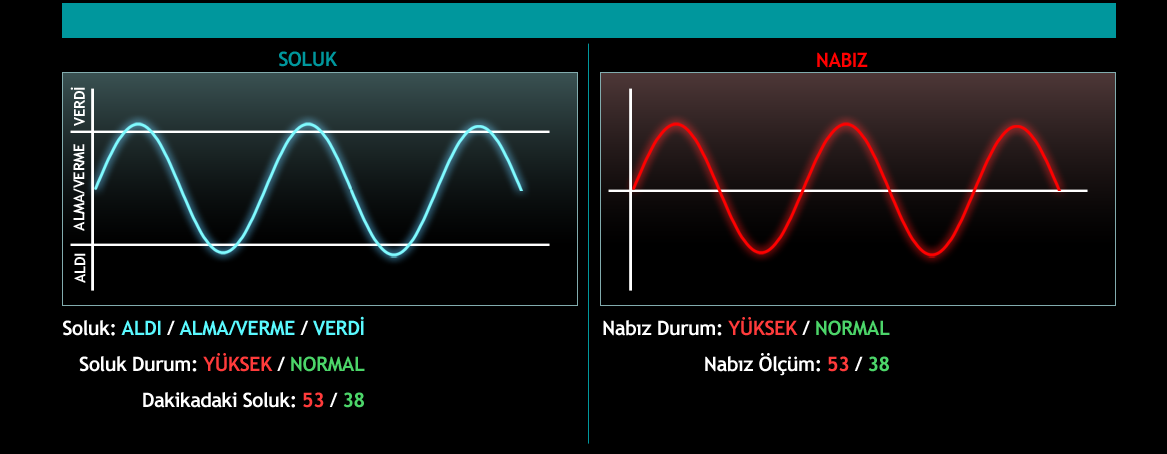
<style>
.page{position:relative;width:1167px;height:454px;background:#000000}
.page>*{position:absolute;margin:0}
.t1{font:20px "TrebuchetMS-Bold";letter-spacing:-0.03em;color:#00979d}
.t2{font:20px "TrebuchetMS-Bold";letter-spacing:-0.03em;color:#ff0000}
.t3{font:15px "TrebuchetMS-Bold";letter-spacing:-0.03em;color:#ffffff}
.t4{font:20px/18px "TrebuchetMS-Bold";letter-spacing:-0.03em;color:#ffffff}
.t5{font:20px/18px "TrebuchetMS-Bold";letter-spacing:-0.03em;color:#5af9ff}
.t6{font:20px/18px "TrebuchetMS-Bold";letter-spacing:-0.03em;color:#ff3b3b}
.t7{font:20px/18px "TrebuchetMS-Bold";letter-spacing:-0.03em;color:#4cd569}
</style>
<div class="page">
<p class="t1" style="left:279px;top:51px;width:59px;height:16px">SOLUK</p>
<p class="t2" style="left:817px;top:52px;width:51px;height:16px">NABIZ</p>
<p class="t3" style="left:70px;top:87px;width:15px;height:39px;rotate:-90deg">VERDİ</p>
<p class="t3" style="left:73px;top:144px;width:12px;height:87px;rotate:-90deg">ALMA/VERME</p>
<p class="t3" style="left:74px;top:253px;width:12px;height:30px;rotate:-90deg">ALDI</p>
<p class="t4" style="left:63px;top:316px;width:302px;height:92px;text-align:right">Soluk: <span class="t5">ALDI </span>/<span class="t5"> ALMA/VERME </span>/<span class="t5"> VERDİ<br></span><br>Soluk Durum: <span class="t6">YÜKSEK </span>/ <span class="t7">NORMAL<br></span><br>Dakikadaki Soluk: <span class="t6">53 </span>/ <span class="t7">38</span></p>
<p class="t4" style="left:603px;top:317px;width:287px;height:59px;text-align:right">Nabız Durum: <span class="t6">YÜKSEK </span>/ <span class="t7">NORMAL<br></span><br>Nabız Ölçüm: <span class="t6">53 </span>/ <span class="t7">38</span></p>
</div>
